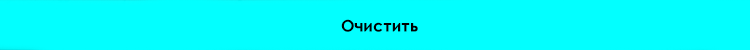
<style>
.page{position:relative;width:750px;height:50px;background:#02ffff}
.page>*{position:absolute;margin:0}
.t1{font:16px "CenturyGothic-Bold";color:#000000}
</style>
<div class="page">
<p class="t1" style="left:341px;top:19px;width:77px;height:13px">Очистить</p>
</div>
